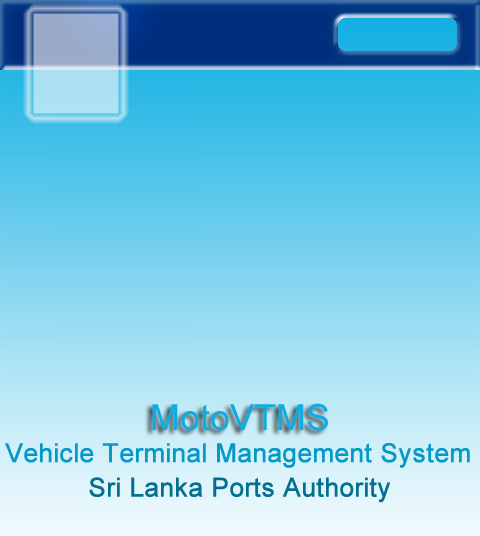
<style>
.page{position:relative;width:480px;height:536px}
.page>*{position:absolute;margin:0}
.t1{font:36px "ArialMT";color:#0cade1}
.t2{font:26px "ArialMT";color:#0599c7;font-weight:bold}
.t3{font:26px "ArialMT";color:#046f91;font-weight:bold}
</style>
<div class="page">
<p class="t1" style="left:152px;top:403px;width:176px;height:28px">MotoVTMS</p>
<p class="t2" style="left:5px;top:443px;width:465px;height:25px">Vehicle Terminal Management System</p>
<p class="t3" style="left:89px;top:477px;width:301px;height:26px">Sri Lanka Ports Authority</p>
</div>
